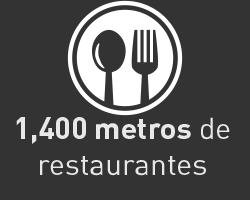
<style>
.page{position:relative;width:250px;height:200px;background:#333333}
.page>*{position:absolute;margin:0}
.t1{font:30px "DINPro";color:#e8e8e8}
.t2{font:30px "DINPro-Bold";color:#e8e8e8}
</style>
<div class="page">
<p class="t1" style="left:16px;top:117px;width:214px;height:59px;text-align:center"><span class="t2">1,400 metros</span> de restaurantes</p>
</div>
